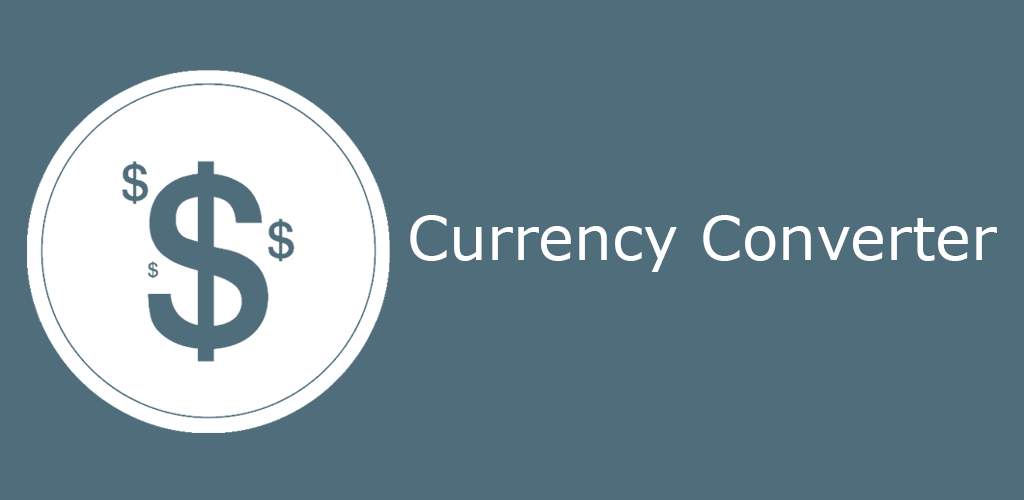
<style>
.page{position:relative;width:1024px;height:500px;background:#4f6d7a}
.page>*{position:absolute;margin:0}
.t1{font:60px "Verdana";color:#ffffff}
</style>
<div class="page">
<p class="t1" style="left:410px;top:215px;width:587px;height:57px">Currency Converter</p>
</div>
